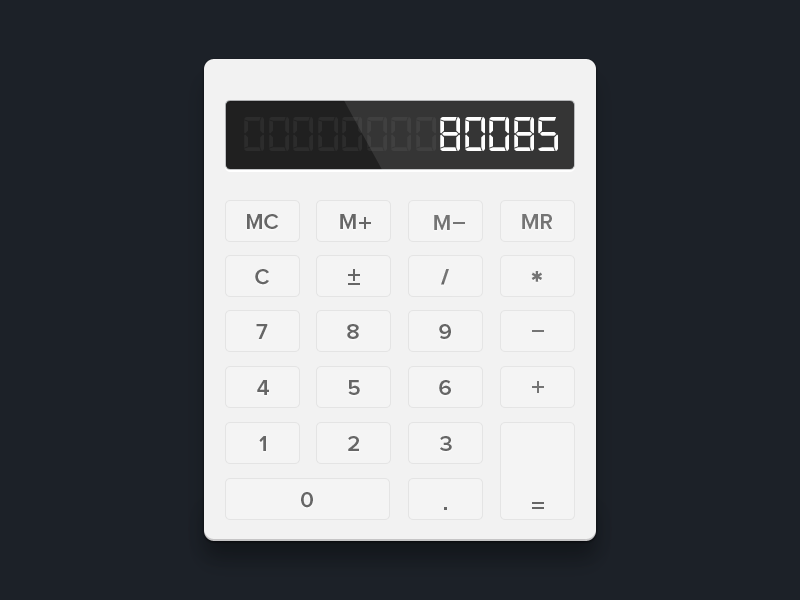
<style>
.page{position:relative;width:800px;height:600px;background:#1c2128}
.page>*{position:absolute;margin:0}
.t1{font:52px "Digital-7";color:#2c2c2c}
.t2{font:52px "Digital-7";color:#ffffff}
.t3{font:22px "ProximaNova-Semibold";color:#666666}
.t4{font:22px "ProximaNova-Black";color:#666666}
.t5{font:32px "ProximaNova-Black";color:#666666}
</style>
<div class="page">
<p class="t1" style="left:244px;top:117px;width:314px;height:34px">00000000<span class="t2">80085</span></p>
<p class="t3" style="left:247px;top:214px;width:32px;height:15px">MC</p>
<p class="t3" style="left:340px;top:214px;width:16px;height:15px">M</p>
<p class="t3" style="left:434px;top:215px;width:16px;height:15px">M</p>
<p class="t3" style="left:522px;top:214px;width:30px;height:15px">MR</p>
<p class="t3" style="left:255px;top:269px;width:14px;height:16px">C</p>
<p class="t4" style="left:441px;top:269px;width:8px;height:16px">/</p>
<p class="t5" style="left:531px;top:271px;width:11px;height:11px">*</p>
<p class="t3" style="left:256px;top:324px;width:12px;height:15px">7</p>
<p class="t3" style="left:347px;top:324px;width:12px;height:15px">8</p>
<p class="t3" style="left:439px;top:324px;width:12px;height:15px">9</p>
<p class="t3" style="left:257px;top:380px;width:12px;height:15px">4</p>
<p class="t3" style="left:348px;top:380px;width:12px;height:15px">5</p>
<p class="t3" style="left:439px;top:380px;width:12px;height:15px">6</p>
<p class="t3" style="left:259px;top:436px;width:7px;height:15px">1</p>
<p class="t3" style="left:348px;top:436px;width:11px;height:15px">2</p>
<p class="t3" style="left:440px;top:436px;width:12px;height:15px">3</p>
<p class="t3" style="left:301px;top:492px;width:12px;height:16px">0</p>
</div>
